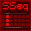
<style>
.page{position:relative;width:31px;height:31px;background:#320000}
.page>*{position:absolute;margin:0}
.t1{font:10px "rktr7rg";color:#ff0000}
</style>
<div class="page">
<p class="t1" style="left:2px;top:2px;width:26px;height:9px">SSeq</p>
</div>
